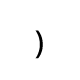
<style>
.page{position:relative;width:80px;height:80px;background:#ffffff}
.page>*{position:absolute;margin:0}
.t1{font:31.8px "DroidSans";color:#000000}
</style>
<div class="page">
<p class="t1" style="left:35px;top:30px;width:8px;height:29px">)</p>
</div>
